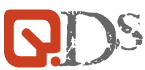
<style>
.page{position:relative;width:145px;height:70px;background:#ffffff}
.page>*{position:absolute;margin:0}
.t1{font:72px "Orgy";color:#cb3f20}
.t2{font:72px "28-Days-Later-Regular";color:#cb3f20}
.t3{font:65px "Crack-Babies";color:#666666}
</style>
<div class="page">
<p class="t1" style="left:4px;top:9px;width:57px;height:59px"><span class="t2"> </span>q</p>
<p class="t3" style="left:59px;top:10px;width:84px;height:57px">Ds</p>
</div>
